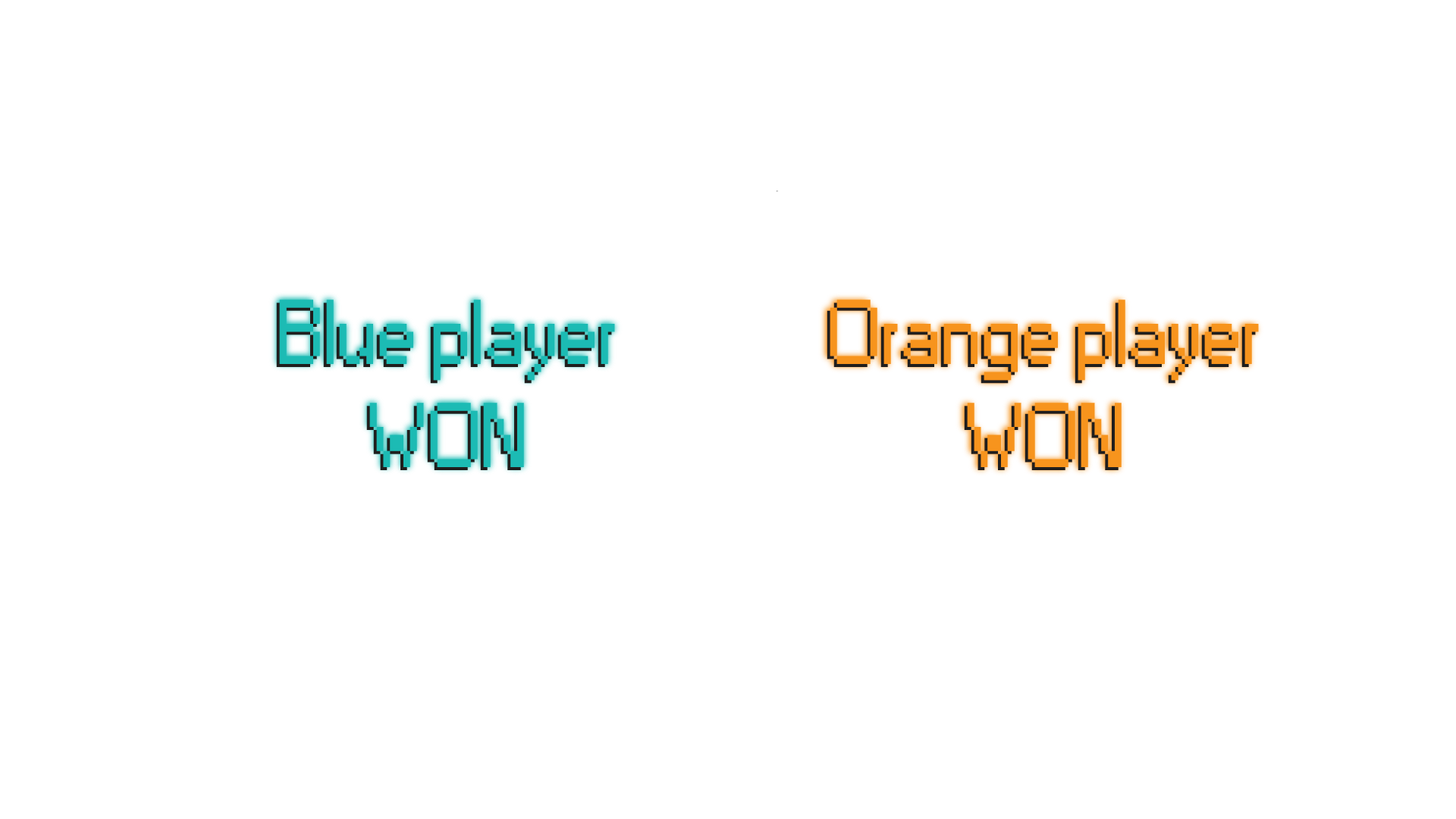
<style>
.page{position:relative;width:1456px;height:819px;background:#ffffff}
.page>*{position:absolute;margin:0}
.t1{font:85.7px "Small Fonts"}
.t2{font:85.7px "Small Fonts";color:#1cbbb4}
.t3{font:85.7px "Small Fonts";color:#f7941d}
</style>
<div class="page">
<p class="t1" style="left:276px;top:303px;width:336px;height:167px;text-align:center">Blue player<br>WON</p>
<p class="t2" style="left:279px;top:300px;width:336px;height:167px;text-align:center">Blue player<br>WON</p>
<p class="t1" style="left:827px;top:303px;width:429px;height:167px;text-align:center">Orange player<br>WON</p>
<p class="t3" style="left:830px;top:300px;width:429px;height:167px;text-align:center">Orange player<br>WON</p>
</div>
